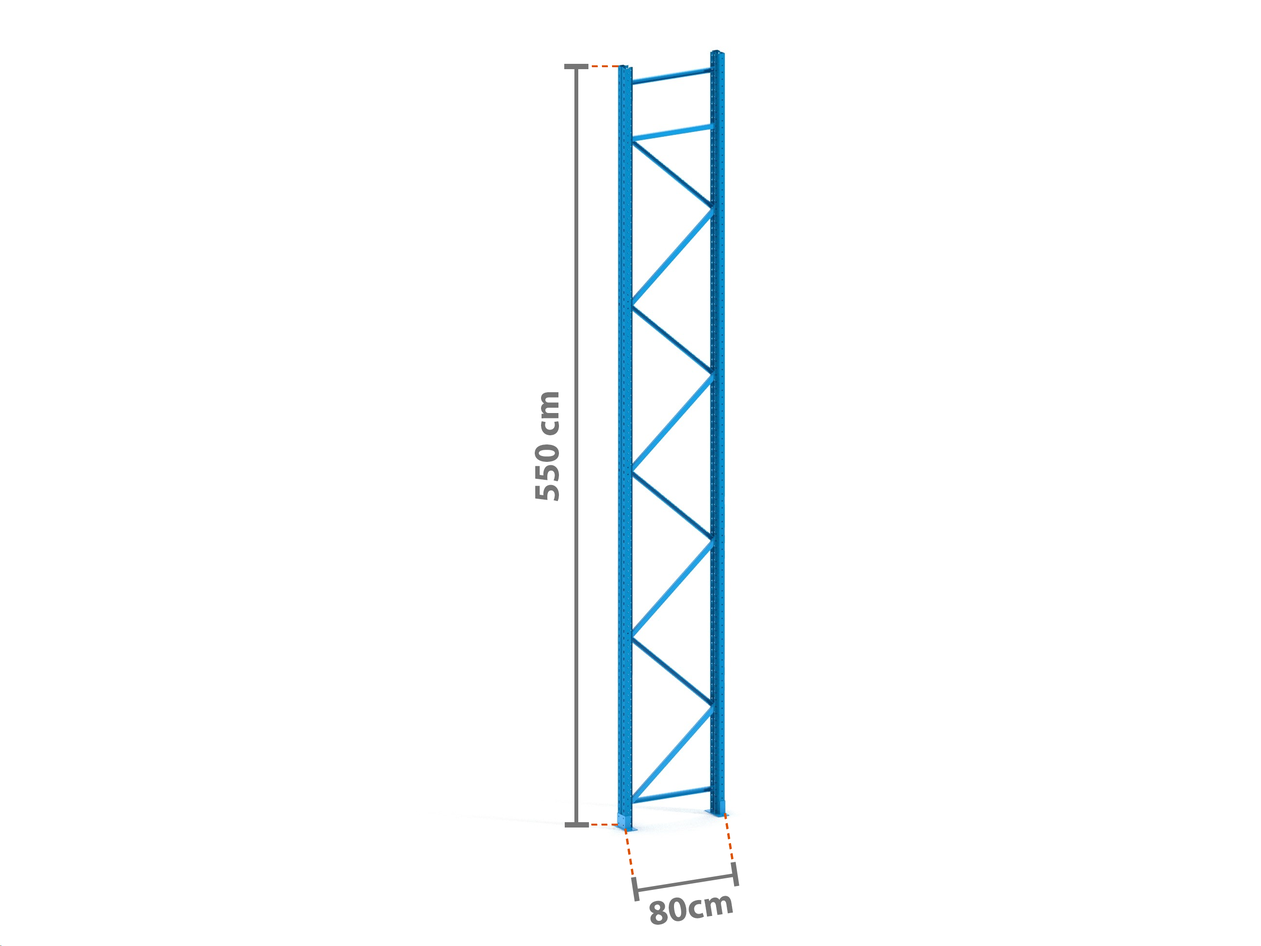
<style>
.page{position:relative;width:1261px;height:946px;background:#ffffff}
.page>*{position:absolute;margin:0}
.t1{font:35.5px "MyriadPro-Bold";color:#757575}
</style>
<div class="page">
<p class="t1" style="left:535px;top:392px;width:24px;height:109px;rotate:-90deg">550 cm</p>
<p class="t1" style="left:649px;top:895px;width:84px;height:29px;rotate:-9deg">80cm</p>
</div>
